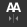
<style>
.page{position:relative;width:27px;height:27px;background:#333333}
.page>*{position:absolute;margin:0}
.t1{font:13px "Helvetica-Bold";color:#ffffff}
</style>
<div class="page">
<p class="t1" style="left:6px;top:2px;width:15px;height:10px">AA</p>
</div>
